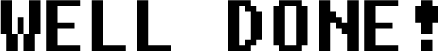
<style>
.page{position:relative;width:438px;height:51px;background:#ffffff}
.page>*{position:absolute;margin:0}
.t1{font:72px "Fixedsys";color:#000000}
</style>
<div class="page">
<p class="t1" style="left:0px;top:0px;width:438px;height:51px">WELL DONE!</p>
</div>
